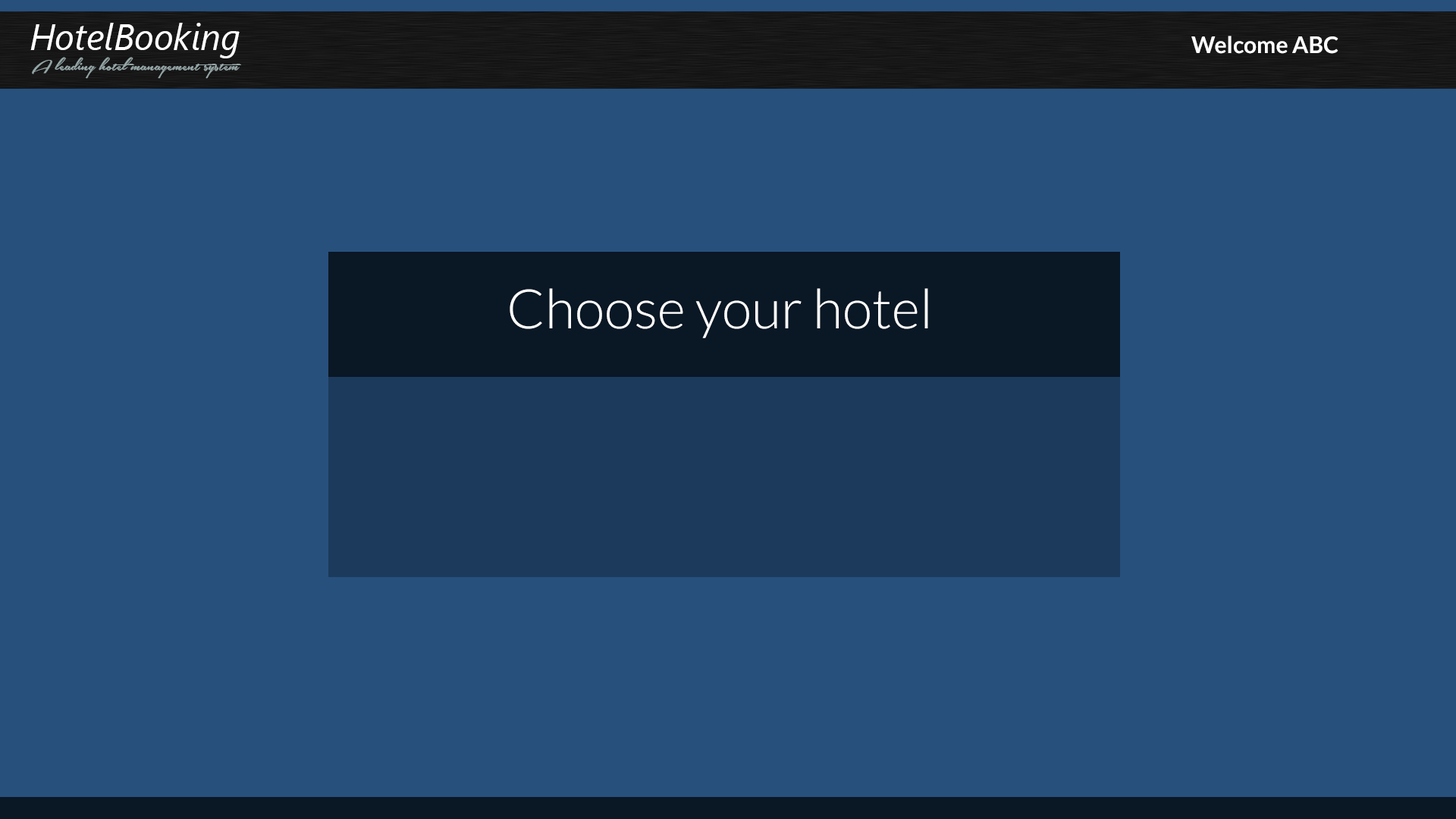
<style>
.page{position:relative;width:1456px;height:819px;background:#27507d}
.page>*{position:absolute;margin:0}
.t1{font:36.4px "SegoeUI-Italic";color:#ffffff}
.t2{font:22.7px "Lato-Bold";color:#ffffff}
.t3{font:22.7px "SouthernAirePersonalUseOnly";color:#95a5a6}
.t4{font:54.6px "Lato-Light";color:#ffffff}
</style>
<div class="page">
<p class="t1" style="left:30px;top:23px;width:210px;height:35px">HotelBooking</p>
<p class="t2" style="left:1191px;top:36px;width:147px;height:18px">Welcome ABC</p>
<p class="t3" style="left:32px;top:57px;width:209px;height:22px">A leading hotel management system</p>
<p class="t4" style="left:510px;top:288px;width:418px;height:50px">Choose your hotel</p>
</div>
